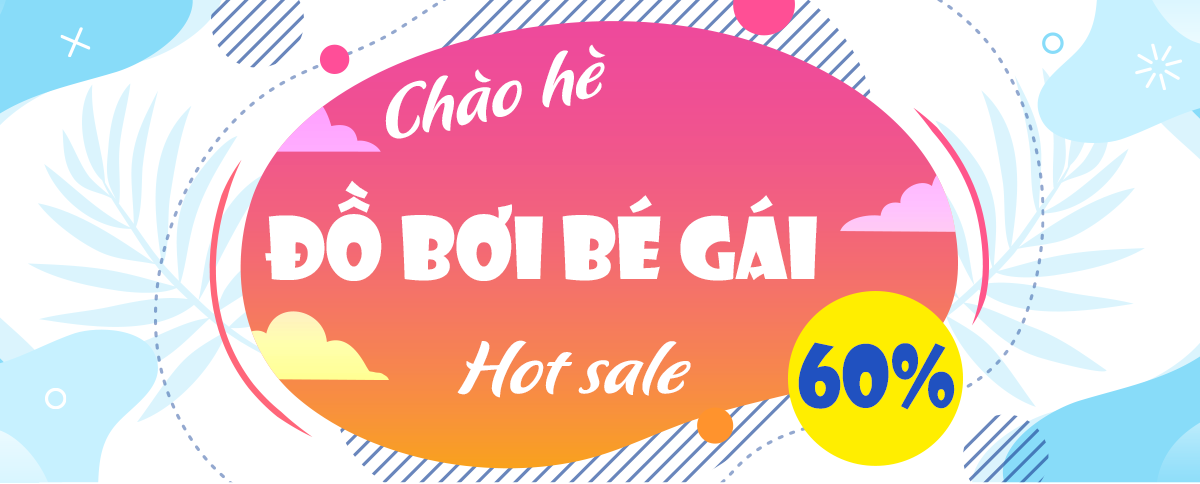
<style>
.page{position:relative;width:1200px;height:484px;background:#ffffff}
.page>*{position:absolute;margin:0}
.t1{font:75px "UTM-Flavour";color:#ffffff}
.t2{font:83.3px "UTM-Showcard";color:#ffffff}
.t3{font:83.3px "UTM-Showcard";color:#2051c0}
</style>
<div class="page">
<p class="t1" style="left:385px;top:44px;width:221px;height:95px;rotate:-12deg">Chào hè</p>
<p class="t2" style="left:265px;top:180px;width:552px;height:101px">ĐỒ BƠI BÉ GÁI</p>
<p class="t1" style="left:457px;top:340px;width:234px;height:58px">Hot sale</p>
<p class="t3" style="left:798px;top:342px;width:157px;height:68px">60%</p>
</div>
